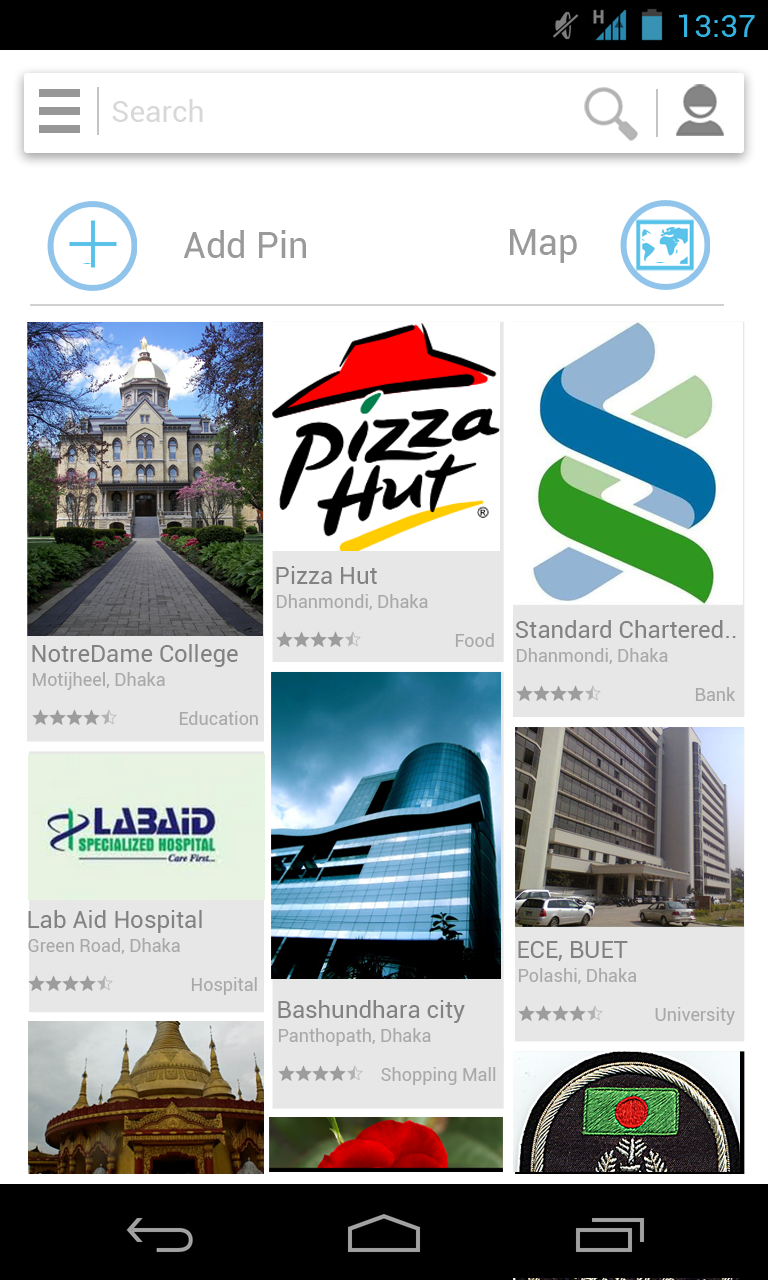
<style>
.page{position:relative;width:768px;height:1280px;background:#ffffff}
.page>*{position:absolute;margin:0}
.t1{font:36px "Roboto-Regular";color:#9a9a9a}
.t2{font:24px "Roboto-Regular";color:#828282}
.t3{font:18px "Roboto-Regular";color:#aaa9a9}
</style>
<div class="page">
<p class="t1" style="left:183px;top:230px;width:123px;height:28px">Add Pin</p>
<p class="t1" style="left:510px;top:229px;width:67px;height:34px">Map</p>
<p class="t2" style="left:515px;top:620px;width:221px;height:18px">Standard Chartered..</p>
<p class="t2" style="left:32px;top:644px;width:206px;height:23px">NotreDame College</p>
<p class="t3" style="left:516px;top:648px;width:152px;height:16px">Dhanmondi, Dhaka</p>
<p class="t3" style="left:32px;top:672px;width:133px;height:18px">Motijheel, Dhaka</p>
<p class="t3" style="left:695px;top:687px;width:40px;height:14px">Bank</p>
<p class="t3" style="left:179px;top:711px;width:79px;height:14px">Education</p>
<p class="t2" style="left:28px;top:910px;width:174px;height:23px">Lab Aid Hospital</p>
<p class="t3" style="left:28px;top:938px;width:152px;height:16px">Green Road, Dhaka</p>
<p class="t2" style="left:518px;top:941px;width:110px;height:20px">ECE, BUET</p>
<p class="t3" style="left:191px;top:977px;width:66px;height:18px">Hospital</p>
<p class="t3" style="left:518px;top:968px;width:119px;height:16px">Polashi, Dhaka</p>
<p class="t2" style="left:278px;top:1000px;width:187px;height:23px">Bashundhara city</p>
<p class="t3" style="left:655px;top:1007px;width:80px;height:18px">University</p>
<p class="t3" style="left:278px;top:1028px;width:153px;height:18px">Panthopath, Dhaka</p>
<p class="t3" style="left:381px;top:1067px;width:115px;height:18px">Shopping Mall</p>
</div>
